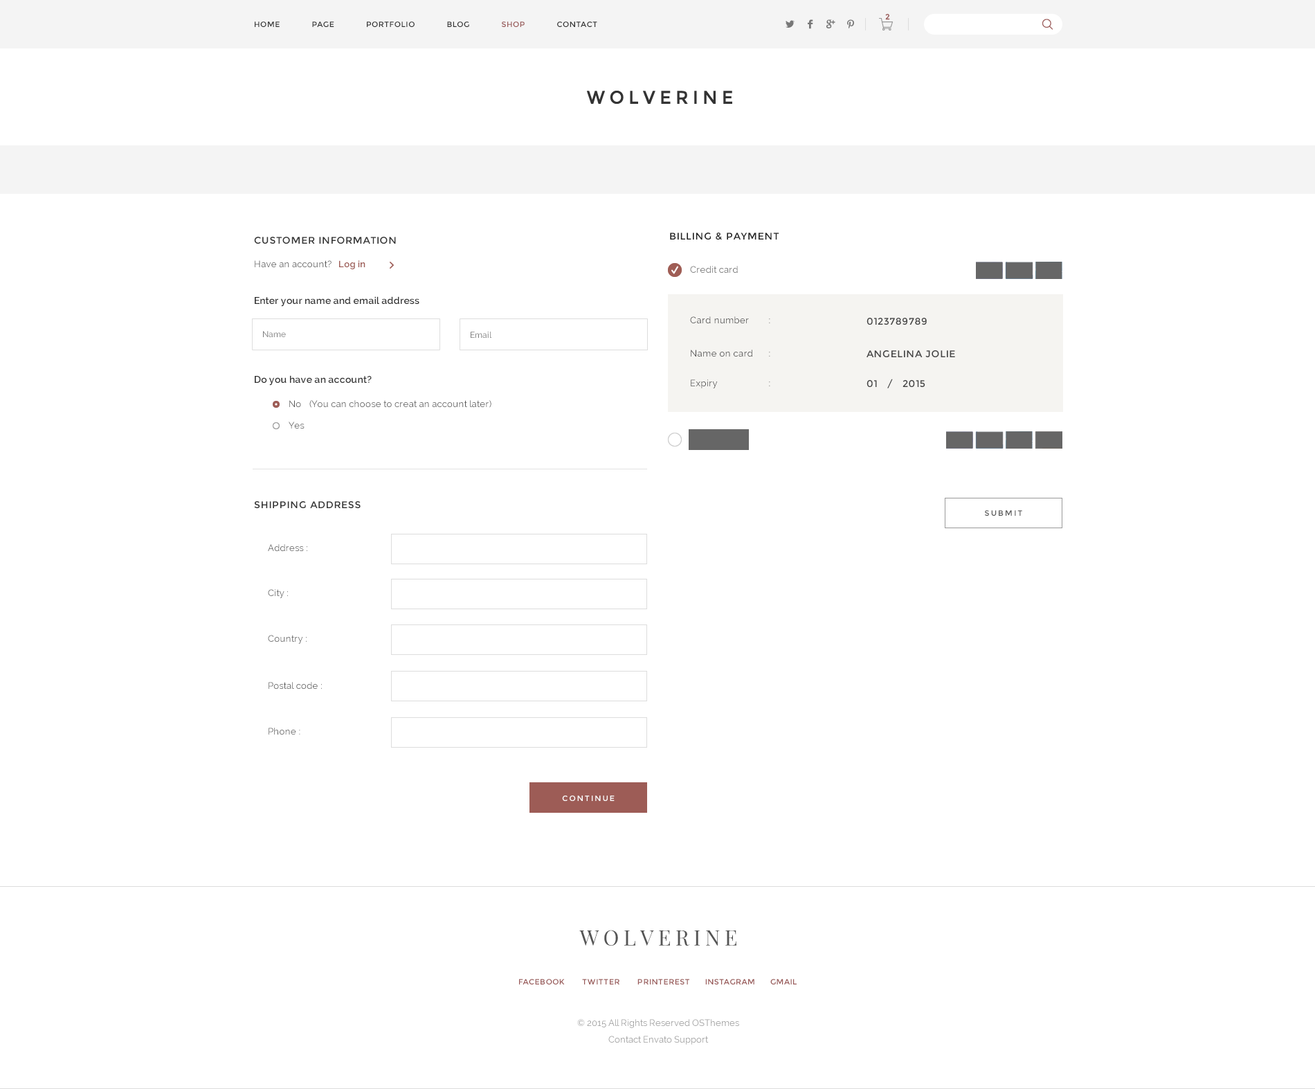
<style>
.page{position:relative;width:1315px;height:1089px;background:#ffffff}
.page>*{position:absolute;margin:0}
.t1{font:7.6px "Montserrat-Regular";color:#9a5a58;font-weight:bold}
.t2{font:7.6px "Montserrat-Regular";letter-spacing:0.05em;color:#333333}
.t3{font:7.6px "Montserrat-Regular";letter-spacing:0.05em;color:#995958}
.t4{font:9.7px "Montserrat-Regular";letter-spacing:0.05em;color:#212121}
.t5{font:9.7px "Montserrat-Regular";letter-spacing:0.05em;color:#333333}
.t6{font:9px "Raleway";letter-spacing:0.02em;color:#545454}
.t7{font:9px "Raleway-SemiBold";letter-spacing:0.02em;color:#9d5b55}
.t8{font:9px "Raleway";letter-spacing:0.02em;color:#666666}
.t9{font:9.7px "Raleway-SemiBold";letter-spacing:0.02em;color:#333333}
.t10{font:9px "Raleway";letter-spacing:0.04em;color:#444444}
.t11{font:9.7px "Montserrat-Regular";letter-spacing:0.04em;color:#444444}
.t12{font:8.3px "Raleway";color:#777777}
.t13{font:9px "Raleway";letter-spacing:0.02em;color:#555555}
.t14{font:9px "Raleway";letter-spacing:0.02em}
.t15{font:7.6px "Montserrat-Regular";letter-spacing:0.2em;color:#555555}
.t16{font:7.6px "Montserrat-Regular";letter-spacing:0.2em;color:#ffffff}
.t17{font:21.4px "PlayfairDisplay-Regular";letter-spacing:0.1em;color:#555555}
.t18{font:9px/16.2px "Raleway";color:#999999}
</style>
<div class="page">
<p class="t1" style="left:885px;top:14px;width:5px;height:6px">2</p>
<p class="t2" style="left:255px;top:21px;width:342px;height:6px">HOME      PAGE      PORTFOLIO      BLOG      <span class="t3">SHOP </span>     CONTACT</p>
<p class="t4" style="left:670px;top:233px;width:110px;height:7px">BILLING &amp; PAYMENT</p>
<p class="t5" style="left:254px;top:237px;width:142px;height:7px">CUSTOMER INFORMATION</p>
<p class="t6" style="left:255px;top:260px;width:111px;height:9px">Have an account?   <span class="t7">Log in</span></p>
<p class="t8" style="left:690px;top:266px;width:48px;height:7px">Credit card</p>
<p class="t9" style="left:255px;top:296px;width:165px;height:11px">Enter your name and email address</p>
<p class="t10" style="left:690px;top:316px;width:81px;height:8px">Card number       :</p>
<p class="t11" style="left:867px;top:318px;width:60px;height:7px">0123789789</p>
<p class="t12" style="left:263px;top:331px;width:23px;height:6px">Name</p>
<p class="t12" style="left:471px;top:332px;width:21px;height:6px">Email</p>
<p class="t10" style="left:691px;top:350px;width:80px;height:7px">Name on card      :</p>
<p class="t11" style="left:867px;top:350px;width:88px;height:7px">ANGELINA JOLIE</p>
<p class="t9" style="left:255px;top:375px;width:117px;height:11px">Do you have an account?</p>
<p class="t10" style="left:691px;top:379px;width:80px;height:9px">Expiry    :</p>
<p class="t11" style="left:867px;top:379px;width:59px;height:9px">01   /   2015</p>
<p class="t13" style="left:289px;top:400px;width:12px;height:8px">No</p>
<p class="t13" style="left:309px;top:400px;width:183px;height:8px">(You can choose to creat an account later)</p>
<p class="t14" style="left:289px;top:422px;width:16px;height:7px">Yes</p>
<p class="t5" style="left:254px;top:501px;width:107px;height:7px">SHIPPING ADDRESS</p>
<p class="t15" style="left:985px;top:510px;width:38px;height:6px">SUBMIT</p>
<p class="t13" style="left:268px;top:544px;width:39px;height:8px">Address :</p>
<p class="t14" style="left:268px;top:589px;width:20px;height:9px">City :</p>
<p class="t14" style="left:268px;top:635px;width:39px;height:9px">Country :</p>
<p class="t13" style="left:269px;top:682px;width:53px;height:8px">Postal code :</p>
<p class="t13" style="left:269px;top:728px;width:31px;height:7px">Phone :</p>
<p class="t16" style="left:562px;top:795px;width:53px;height:6px">CONTINUE</p>
<p class="t17" style="left:579px;top:930px;width:158px;height:16px">WOLVERINE</p>
<p class="t3" style="left:519px;top:979px;width:278px;height:5px">FACEBOOK       TWITTER       PRINTEREST      INSTAGRAM      GMAIL</p>
<p class="t18" style="left:577px;top:1019px;width:162px;height:26px;text-align:center">© 2015 All Rights Reserved OSThemes<br>Contact Envato Support</p>
</div>
